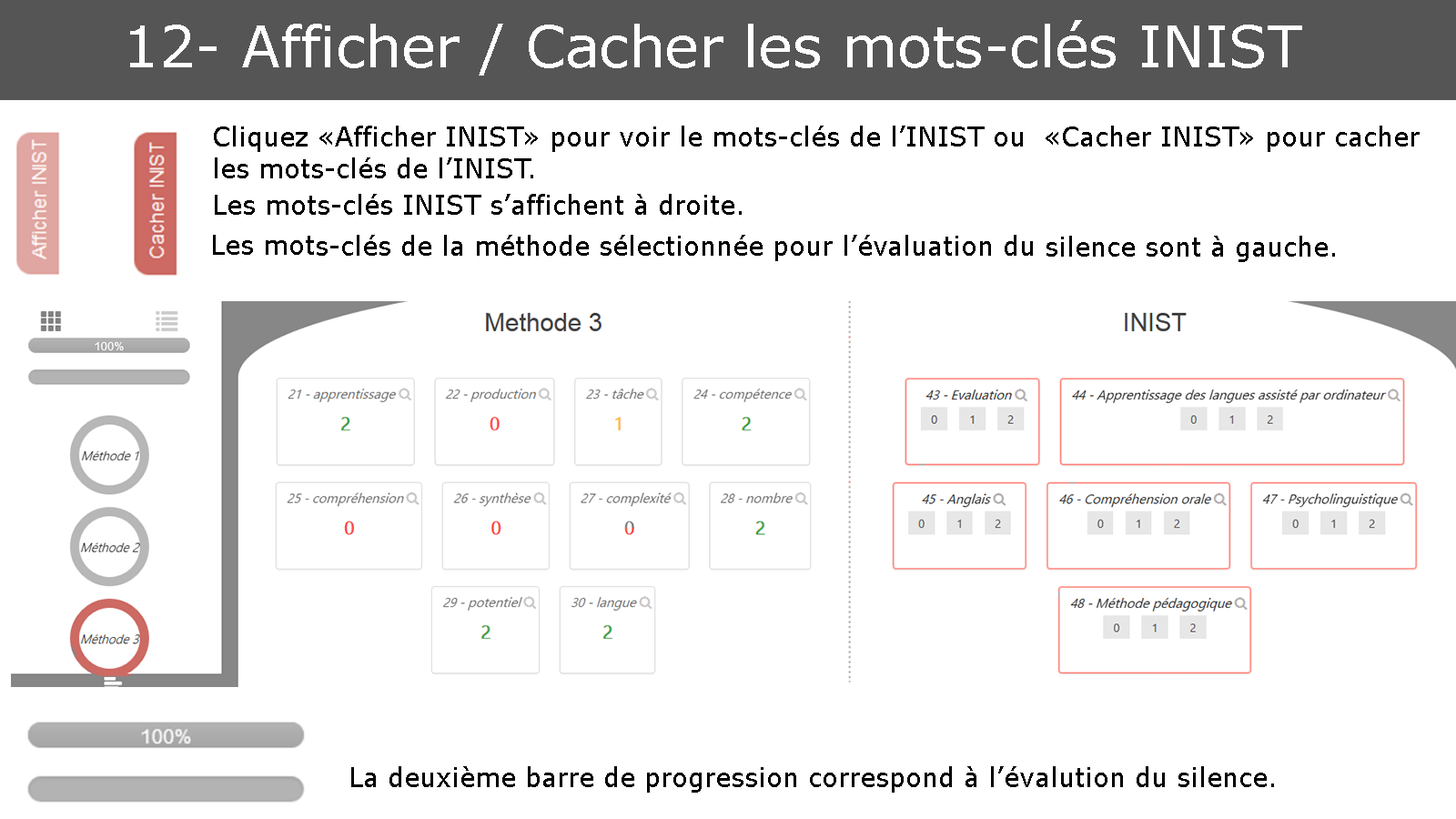
<style>
.page{position:relative;width:1456px;height:819px;background:#ffffff}
.page>*{position:absolute;margin:0}
.t1{font:56.9px "Verdana";color:#ffffff}
.t2{font:26.5px "Verdana";color:#000000}
</style>
<div class="page">
<p class="t1" style="left:130px;top:20px;width:1172px;height:56px">12- Afficher / Cacher les mots-clés INIST</p>
<p class="t2" style="left:214px;top:126px;width:1206px;height:52px">Cliquez «Afficher INIST» pour voir le mots-clés de l’INIST ou  «Cacher INIST» pour cacher les mots-clés de l’INIST.</p>
<p class="t2" style="left:215px;top:194px;width:527px;height:21px">Les mots-clés INIST s’affichent à droite.</p>
<p class="t2" style="left:213px;top:235px;width:1122px;height:27px">Les mots-clés de la méthode sélectionnée pour l’évaluation du silence sont à gauche.</p>
<p class="t2" style="left:351px;top:766px;width:923px;height:27px">La deuxième barre de progression correspond à l’évalution du silence.</p>
</div>
